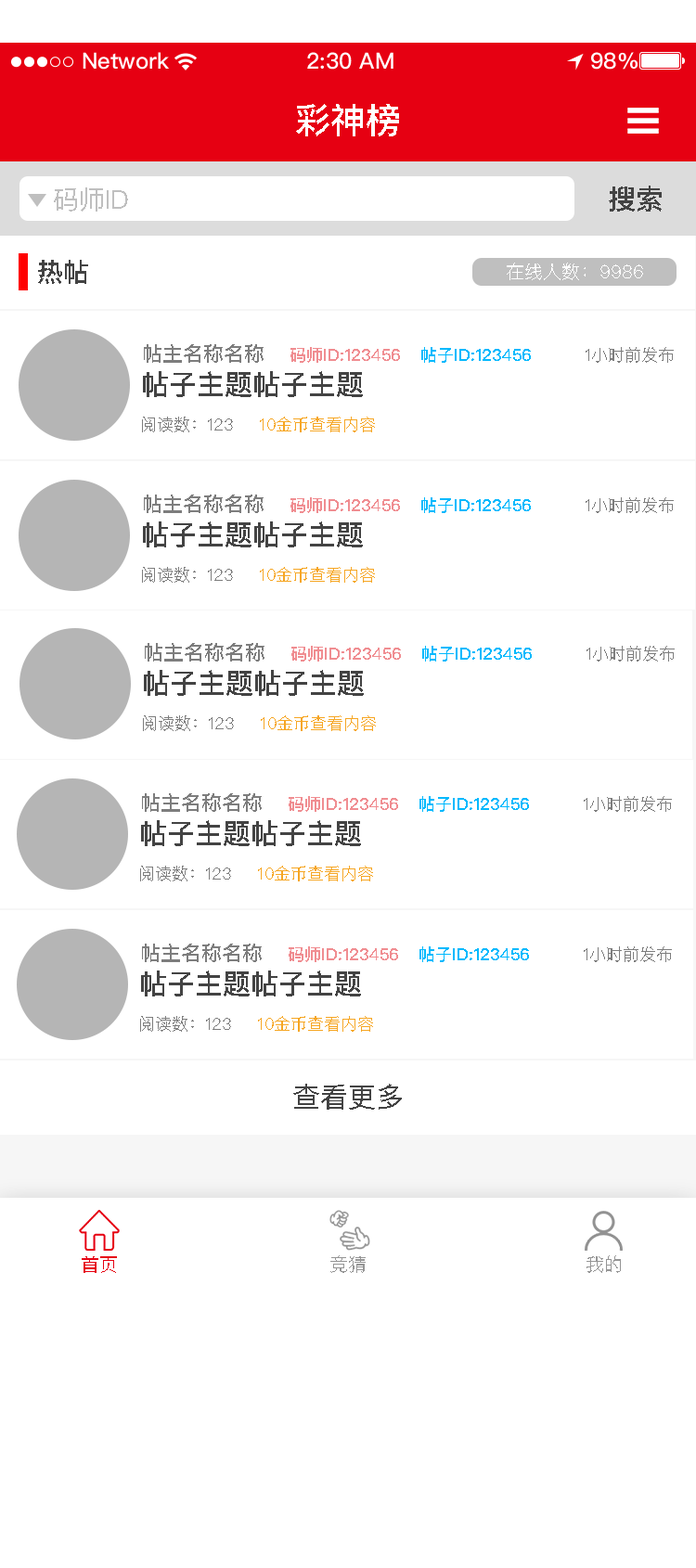
<style>
.page{position:relative;width:696px;height:1568px;background:#ffffff}
.page>*{position:absolute;margin:0}
.t1{font:35.3px "PingFangSC-Medium";color:#ffffff;text-transform:uppercase}
.t2{font:27.8px "PingFangSC-Medium";color:#434343;text-transform:uppercase}
.t3{font:26px "PingFangSC-Regular";color:#bfbfbf;text-transform:uppercase}
.t4{font:26px "PingFangSC-Medium";color:#434343;text-transform:uppercase}
.t5{font:18.6px "PingFangSC-Regular";color:#ffffff;text-transform:uppercase}
.t6{font:20.4px "PingFangSC-Medium";color:#7d7d7d;text-transform:uppercase}
.t7{font:16.7px "PingFangSC-Medium";color:#f08d91;text-transform:uppercase}
.t8{font:16.7px "PingFangSC-Medium";color:#01b9fd;text-transform:uppercase}
.t9{font:16.7px "PingFangSC-Regular";color:#7d7d7d;text-transform:uppercase}
.t10{font:16.7px "PingFangSC-Regular";color:#f6a623;text-transform:uppercase}
.t11{font:27.8px "PingFangSC-Regular";color:#434343;text-transform:uppercase}
.t12{font:18.6px "PingFangSC-Regular";color:#e60012;text-transform:uppercase}
.t13{font:18.6px "PingFangSC-Regular";color:#959595;text-transform:uppercase}
</style>
<div class="page">
<p class="t1" style="left:296px;top:104px;width:103px;height:32px">彩神榜</p>
<p class="t2" style="left:609px;top:186px;width:53px;height:26px">搜索</p>
<p class="t3" style="left:54px;top:187px;width:74px;height:25px">码师ID</p>
<p class="t4" style="left:38px;top:260px;width:50px;height:24px">热帖</p>
<p class="t5" style="left:507px;top:263px;width:136px;height:17px">在线人数：9986</p>
<p class="t6" style="left:144px;top:344px;width:119px;height:19px">帖主名称名称</p>
<p class="t7" style="left:290px;top:347px;width:110px;height:16px">码师id:123456</p>
<p class="t8" style="left:421px;top:347px;width:110px;height:16px">帖子id:123456</p>
<p class="t9" style="left:585px;top:347px;width:89px;height:16px">1小时前发布</p>
<p class="t2" style="left:143px;top:371px;width:220px;height:26px">帖子主题帖子主题</p>
<p class="t9" style="left:142px;top:417px;width:91px;height:15px">阅读数：123</p>
<p class="t10" style="left:260px;top:417px;width:115px;height:15px">10金币查看内容</p>
<p class="t6" style="left:144px;top:495px;width:119px;height:18px">帖主名称名称</p>
<p class="t7" style="left:290px;top:497px;width:110px;height:16px">码师id:123456</p>
<p class="t8" style="left:421px;top:497px;width:110px;height:16px">帖子id:123456</p>
<p class="t9" style="left:585px;top:497px;width:89px;height:16px">1小时前发布</p>
<p class="t2" style="left:143px;top:521px;width:220px;height:26px">帖子主题帖子主题</p>
<p class="t9" style="left:142px;top:567px;width:91px;height:16px">阅读数：123</p>
<p class="t10" style="left:260px;top:567px;width:115px;height:16px">10金币查看内容</p>
<p class="t6" style="left:145px;top:643px;width:119px;height:19px">帖主名称名称</p>
<p class="t7" style="left:291px;top:646px;width:110px;height:16px">码师id:123456</p>
<p class="t8" style="left:422px;top:646px;width:110px;height:16px">帖子id:123456</p>
<p class="t9" style="left:586px;top:646px;width:89px;height:16px">1小时前发布</p>
<p class="t2" style="left:144px;top:670px;width:220px;height:26px">帖子主题帖子主题</p>
<p class="t9" style="left:143px;top:715px;width:91px;height:16px">阅读数：123</p>
<p class="t10" style="left:261px;top:715px;width:115px;height:16px">10金币查看内容</p>
<p class="t6" style="left:142px;top:793px;width:120px;height:19px">帖主名称名称</p>
<p class="t7" style="left:289px;top:796px;width:109px;height:16px">码师id:123456</p>
<p class="t8" style="left:419px;top:796px;width:110px;height:16px">帖子id:123456</p>
<p class="t9" style="left:584px;top:796px;width:88px;height:16px">1小时前发布</p>
<p class="t2" style="left:141px;top:820px;width:220px;height:26px">帖子主题帖子主题</p>
<p class="t9" style="left:140px;top:866px;width:91px;height:15px">阅读数：123</p>
<p class="t10" style="left:258px;top:866px;width:115px;height:15px">10金币查看内容</p>
<p class="t6" style="left:142px;top:944px;width:120px;height:18px">帖主名称名称</p>
<p class="t7" style="left:289px;top:946px;width:109px;height:16px">码师id:123456</p>
<p class="t8" style="left:419px;top:946px;width:110px;height:16px">帖子id:123456</p>
<p class="t9" style="left:584px;top:946px;width:88px;height:16px">1小时前发布</p>
<p class="t2" style="left:141px;top:970px;width:220px;height:26px">帖子主题帖子主题</p>
<p class="t9" style="left:140px;top:1016px;width:91px;height:16px">阅读数：123</p>
<p class="t10" style="left:258px;top:1016px;width:115px;height:16px">10金币查看内容</p>
<p class="t11" style="left:293px;top:1084px;width:109px;height:26px">查看更多</p>
<p class="t12" style="left:82px;top:1256px;width:35px;height:17px">首页</p>
<p class="t13" style="left:330px;top:1255px;width:36px;height:18px">竞猜</p>
<p class="t13" style="left:586px;top:1255px;width:35px;height:18px">我的</p>
</div>
